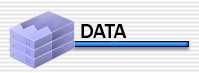
<style>
.page{position:relative;width:199px;height:73px}
.page>*{position:absolute;margin:0}
.t1{font:21px "FranklinGothic-Medium";color:#000000}
</style>
<div class="page">
<p class="t1" style="left:81px;top:24px;width:46px;height:14px">DATA</p>
</div>
